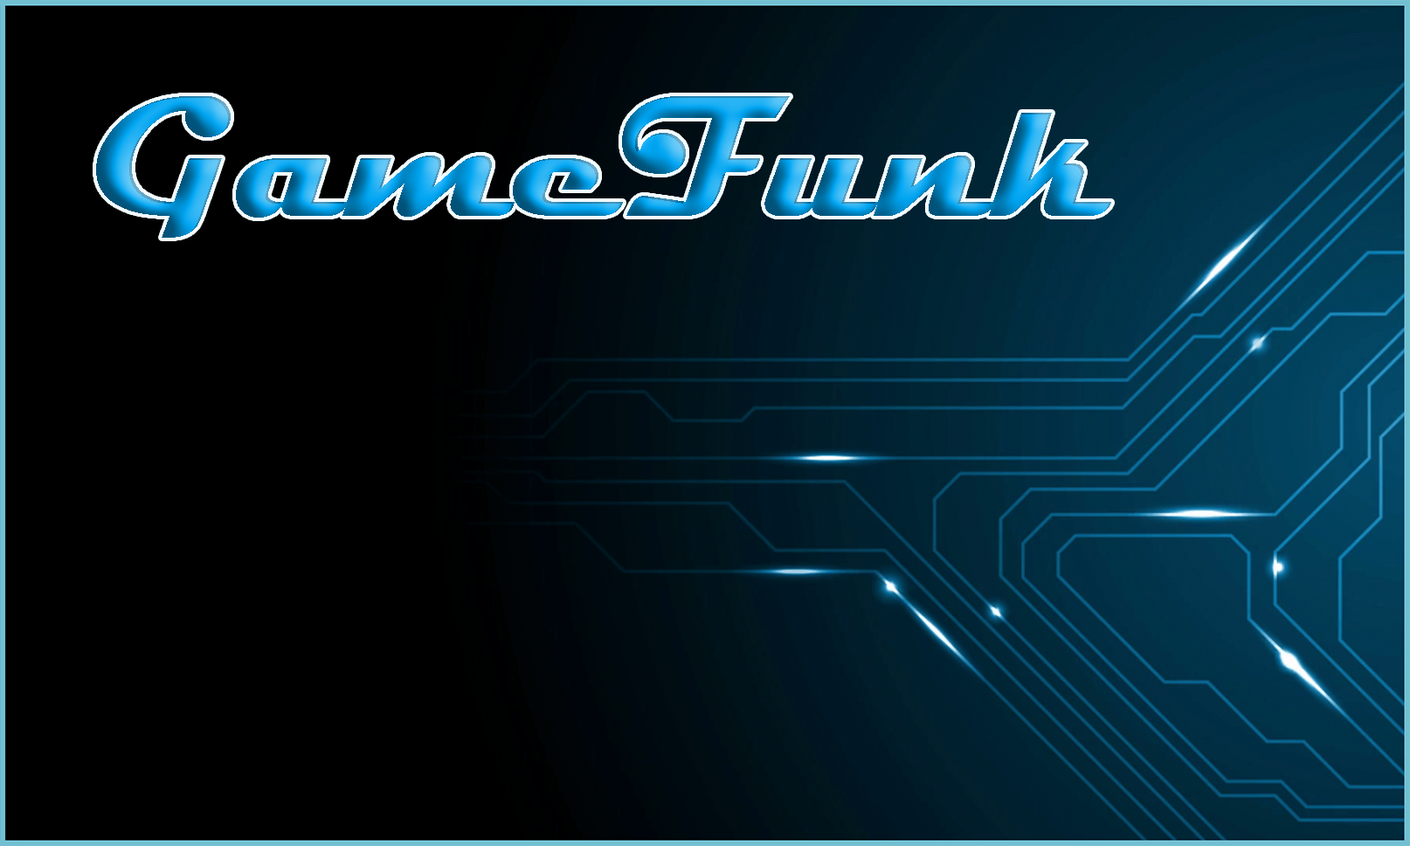
<style>
.page{position:relative;width:1410px;height:846px;background:#000000}
.page>*{position:absolute;margin:0}
.t1{font:174.7px "Magneto-Bold"}
</style>
<div class="page">
<p class="t1" style="left:96px;top:96px;width:1015px;height:142px">GameFunk</p>
</div>
